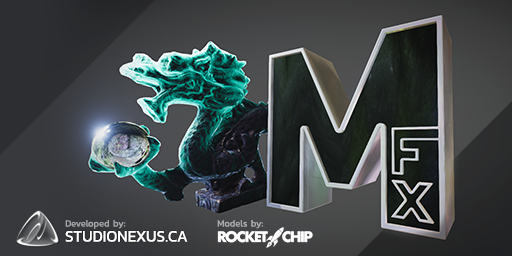
<style>
.page{position:relative;width:512px;height:256px}
.page>*{position:absolute;margin:0}
.t1{font:9.5px "Kanit-Regular";color:#a6a6a7}
.t2{font:9.5px "Kanit-Regular";color:#ababab}
.t3{font:16.1px "Kanit-Regular";color:#ffffff}
</style>
<div class="page">
<p class="t1" style="left:65px;top:220px;width:61px;height:9px">Developed by:</p>
<p class="t2" style="left:217px;top:220px;width:46px;height:9px">Models by:</p>
<p class="t3" style="left:65px;top:231px;width:123px;height:11px">STUDIONEXUS.CA</p>
</div>
